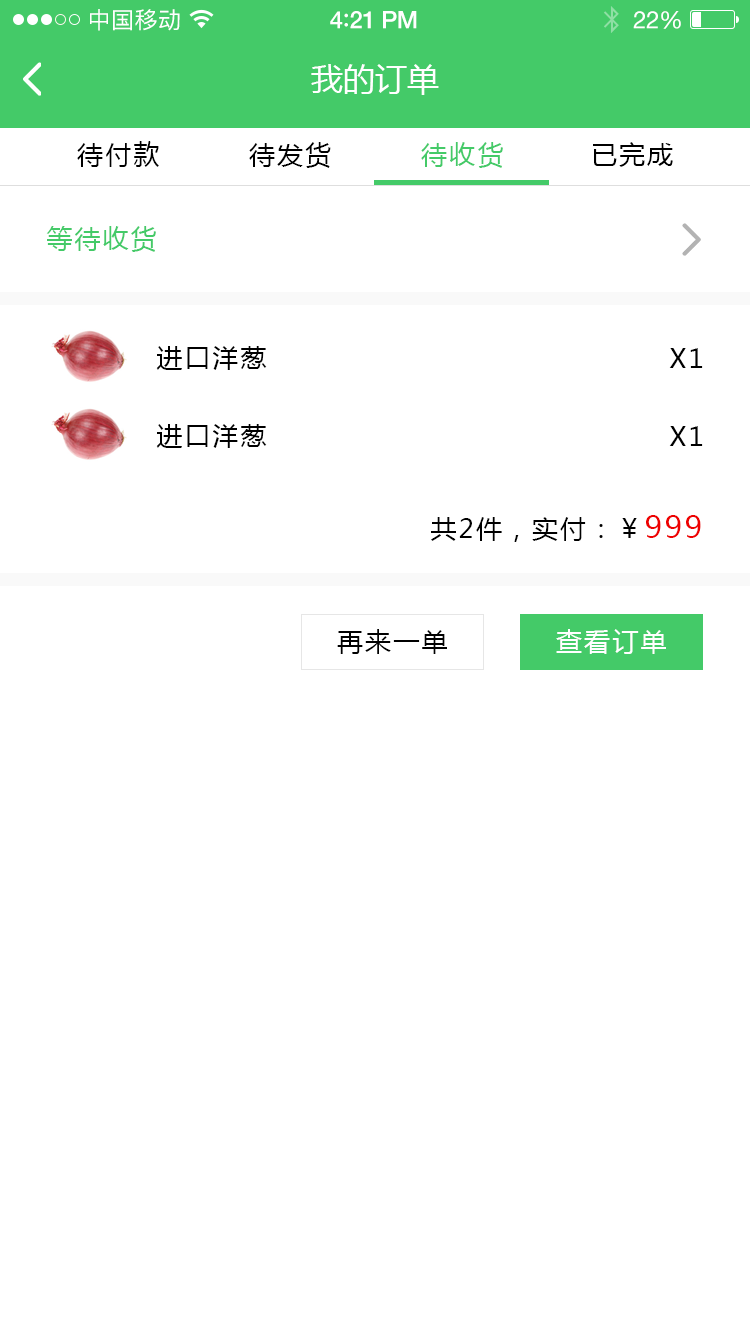
<style>
.page{position:relative;width:750px;height:1334px;background:#ffffff}
.page>*{position:absolute;margin:0}
.t1{font:23px "PingFangSC-Regular";letter-spacing:0.02em;color:#ffffff}
.t2{font:24px "HelveticaNeue-Medium";letter-spacing:-0.02em;color:#ffffff}
.t3{font:26px "Avenir-Medium";letter-spacing:-0.02em;color:#ffffff}
.t4{font:24px "HelveticaNeue";letter-spacing:-0.02em;color:#ffffff}
.t5{font:32px "MicrosoftYaHei";color:#ffffff;text-transform:uppercase}
.t6{font:26px "MicrosoftYaHei";letter-spacing:0.08em;color:#010101;text-transform:uppercase}
.t7{font:26px "MicrosoftYaHei";letter-spacing:0.08em;color:#000000;text-transform:uppercase}
.t8{font:26px "MicrosoftYaHei";letter-spacing:0.08em;color:#44ca68;text-transform:uppercase}
.t9{font:30px "MicrosoftYaHei";letter-spacing:0.08em;color:#ee0101;text-transform:uppercase}
.t10{font:26px "MicrosoftYaHei";letter-spacing:0.08em;color:#ffffff;text-transform:uppercase}
</style>
<div class="page">
<p class="t1" style="left:90px;top:9px;width:90px;height:22px">中国移动</p>
<p class="t2" style="left:330px;top:11px;width:87px;height:18px">4<span class="t3">:</span>21 PM</p>
<p class="t4" style="left:633px;top:11px;width:48px;height:18px">22%</p>
<p class="t5" style="left:311px;top:64px;width:128px;height:31px">我的订单</p>
<p class="t6" style="left:77px;top:141px;width:82px;height:26px">待付款</p>
<p class="t7" style="left:249px;top:142px;width:82px;height:26px">待发货</p>
<p class="t8" style="left:421px;top:142px;width:82px;height:26px">待收货</p>
<p class="t7" style="left:593px;top:142px;width:80px;height:25px">已完成</p>
<p class="t8" style="left:46px;top:226px;width:110px;height:26px">等待收货</p>
<p class="t7" style="left:156px;top:346px;width:111px;height:24px">进口洋葱</p>
<p class="t7" style="left:669px;top:348px;width:34px;height:20px">x1</p>
<p class="t7" style="left:156px;top:424px;width:111px;height:24px">进口洋葱</p>
<p class="t7" style="left:669px;top:426px;width:34px;height:20px">x1</p>
<p class="t7" style="left:431px;top:515px;width:270px;height:27px">共2件，实付：￥<span class="t9">999</span></p>
<p class="t7" style="left:337px;top:629px;width:110px;height:25px">再来一单</p>
<p class="t10" style="left:556px;top:629px;width:110px;height:25px">查看订单</p>
</div>
